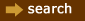
<style>
.page{position:relative;width:85px;height:21px;background:#663300}
.page>*{position:absolute;margin:0}
.t1{font:13px "Verdana";color:#ffffff;font-weight:bold}
</style>
<div class="page">
<p class="t1" style="left:28px;top:3px;width:44px;height:11px">search</p>
</div>
